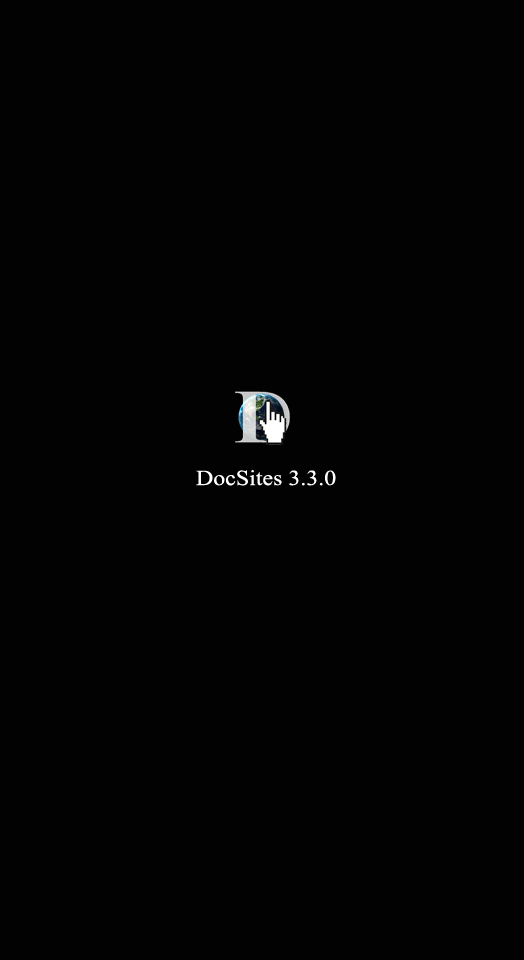
<style>
.page{position:relative;width:524px;height:960px;background:#020202}
.page>*{position:absolute;margin:0}
.t1{font:21.5px "TimesNewRomanPSMT";color:#ffffff;scale:1.12 1}
</style>
<div class="page">
<p class="t1" style="left:196px;top:470px;width:140px;height:16px">DocSites 3.3.0</p>
</div>
